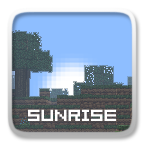
<style>
.page{position:relative;width:144px;height:144px;background:#8ebeff}
.page>*{position:absolute;margin:0}
.t1{font:18px "04b08";color:#ffffff}
</style>
<div class="page">
<p class="t1" style="left:28px;top:109px;width:88px;height:12px">sunrise</p>
</div>
